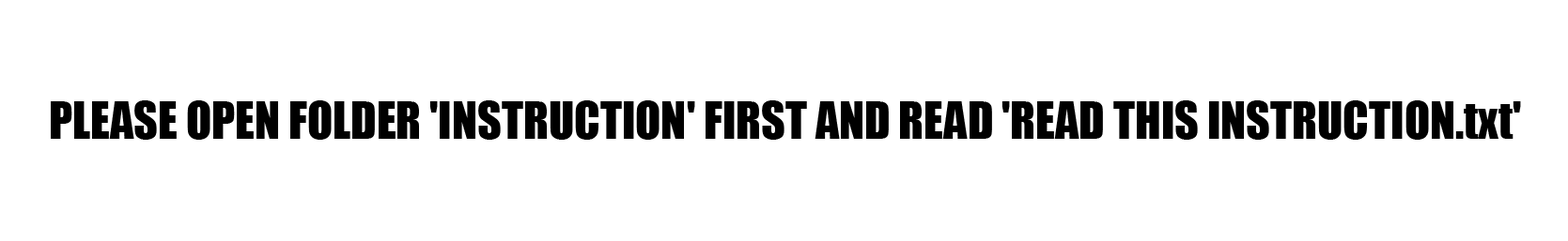
<style>
.page{position:relative;width:1568px;height:241px;background:#ffffff}
.page>*{position:absolute;margin:0}
.t1{font:47px "Impact";color:#000000}
</style>
<div class="page">
<p class="t1" style="left:51px;top:101px;width:1470px;height:39px">PLEASE OPEN FOLDER 'INSTRUCTION' FIRST AND READ 'READ THIS INSTRUCTION.txt'</p>
</div>
